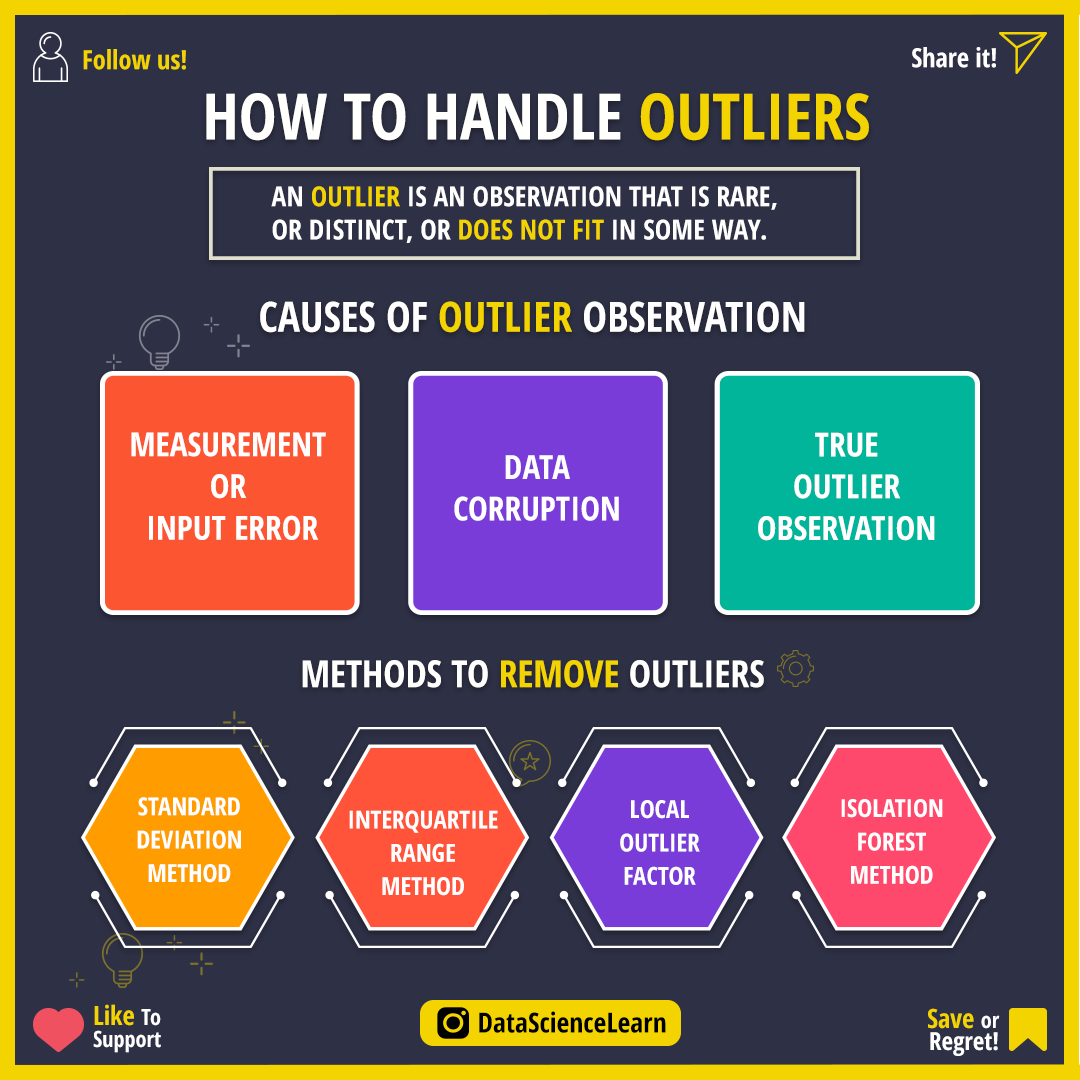
<style>
.page{position:relative;width:1080px;height:1080px;background:#2e3045}
.page>*{position:absolute;margin:0}
.t1{font:26.4px "OpenSans-CondensedBold";color:#f3d400}
.t2{font:26.4px "OpenSans-CondensedBold";color:#ffffff}
.t3{font:63.9px "OpenSans-CondensedBold";color:#fffffe}
.t4{font:63.9px "OpenSans-CondensedBold";color:#f3d400}
.t5{font:27.8px/33.3px "OpenSans-CondensedBold";color:#ffffff}
.t6{font:27.8px/33.3px "OpenSans-CondensedBold";color:#f3d400}
.t7{font:41.7px "OpenSans-CondensedBold";color:#ffffff}
.t8{font:41.7px "OpenSans-CondensedBold";color:#f3d400}
.t9{font:33.3px/41.7px "OpenSans-CondensedBold";color:#ffffff}
.t10{font:37.5px "OpenSans-CondensedBold";color:#fffffe}
.t11{font:37.5px "OpenSans-CondensedBold";color:#f3d400}
.t12{font:25px/33.3px "OpenSans-CondensedBold";color:#ffffff}
.t13{font:22.2px/22.2px "OpenSans-CondensedBold";color:#ffffff}
.t14{font:26.4px/22.2px "OpenSans-CondensedBold";color:#f3d400}
.t15{font:27.8px "OpenSans-CondensedBold";color:#000000}
.t16{font:25px/22.2px "OpenSans-CondensedBold";color:#ffffff}
</style>
<div class="page">
<p class="t1" style="left:83px;top:49px;width:103px;height:21px">Follow us!</p>
<p class="t2" style="left:912px;top:47px;width:84px;height:21px">Share it!</p>
<p class="t3" style="left:206px;top:93px;width:663px;height:48px">HOW TO HANDLE <span class="t4">OUTLIERS</span></p>
<p class="t5" style="left:271px;top:186px;width:506px;height:57px">AN <span class="t6">OUTLIER </span>IS AN OBSERVATION THAT IS RARE, <br>OR DISTINCT, OR <span class="t6">DOES NOT FIT</span> IN SOME WAY.</p>
<p class="t7" style="left:260px;top:301px;width:545px;height:32px">CAUSES OF <span class="t8">OUTLIER </span>OBSERVATION</p>
<p class="t9" style="left:131px;top:432px;width:195px;height:108px;text-align:center">MEASUREMENT <br>OR <br>INPUT ERROR</p>
<p class="t9" style="left:758px;top:432px;width:177px;height:109px;text-align:center">TRUE<br>OUTLIER<br>OBSERVATION</p>
<p class="t9" style="left:454px;top:455px;width:165px;height:66px;text-align:center">DATA<br>CORRUPTION</p>
<p class="t10" style="left:302px;top:660px;width:462px;height:28px">METHODS TO <span class="t11">REMOVE </span>OUTLIERS</p>
<p class="t12" style="left:137px;top:797px;width:104px;height:86px;text-align:center">STANDARD<br>DEVIATION<br>METHOD</p>
<p class="t12" style="left:620px;top:800px;width:80px;height:85px;text-align:center">LOCAL<br>OUTLIER<br>FACTOR</p>
<p class="t12" style="left:841px;top:799px;width:102px;height:85px;text-align:center">ISOLATION<br>FOREST<br>METHOD</p>
<p class="t12" style="left:349px;top:810px;width:149px;height:86px;text-align:center">INTERQUARTILE<br>RANGE<br>METHOD</p>
<p class="t13" style="left:93px;top:1004px;width:68px;height:49px"><span class="t14">Like </span>To<br>Support</p>
<p class="t15" style="left:479px;top:1011px;width:187px;height:22px">DataScienceLearn</p>
<p class="t16" style="left:928px;top:1008px;width:72px;height:48px;text-align:right"><span class="t14">Save </span><span class="t13">or<br></span>Regret!</p>
</div>
